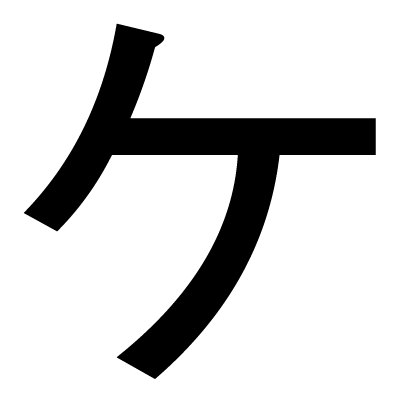
<style>
.page{position:relative;width:400px;height:400px;background:#ffffff}
.page>*{position:absolute;margin:0}
.t1{font:424.8px "MS-PGothic";color:#000000}
</style>
<div class="page">
<p class="t1" style="left:23px;top:23px;width:353px;height:356px">ケ</p>
</div>
